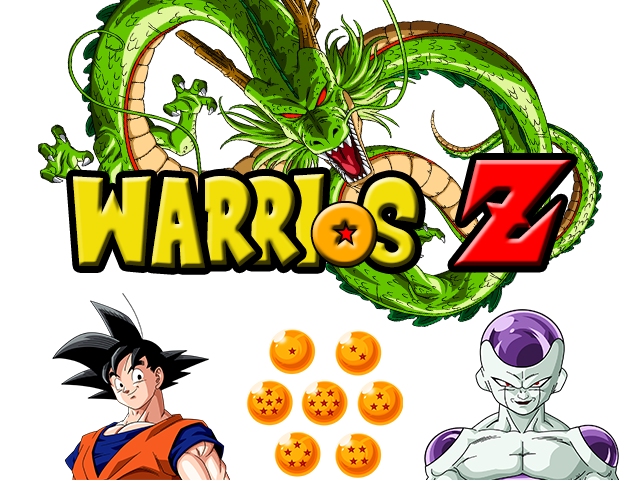
<style>
.page{position:relative;width:640px;height:480px;background:#ffffff}
.page>*{position:absolute;margin:0}
.t1{font:150px "SaiyanSans"}
.t2{font:160px "SaiyanSans"}
</style>
<div class="page">
<p class="t1" style="left:454px;top:160px;width:117px;height:106px">Z</p>
<p class="t1" style="left:294px;top:174px;width:30px;height:93px">i</p>
<p class="t1" style="left:73px;top:176px;width:78px;height:90px">w</p>
<p class="t1" style="left:151px;top:177px;width:54px;height:91px">a</p>
<p class="t1" style="left:204px;top:176px;width:52px;height:91px">r</p>
<p class="t1" style="left:248px;top:176px;width:52px;height:91px">r</p>
<p class="t1" style="left:362px;top:177px;width:57px;height:91px">s</p>
<p class="t2" style="left:312px;top:203px;width:64px;height:63px">o</p>
</div>
